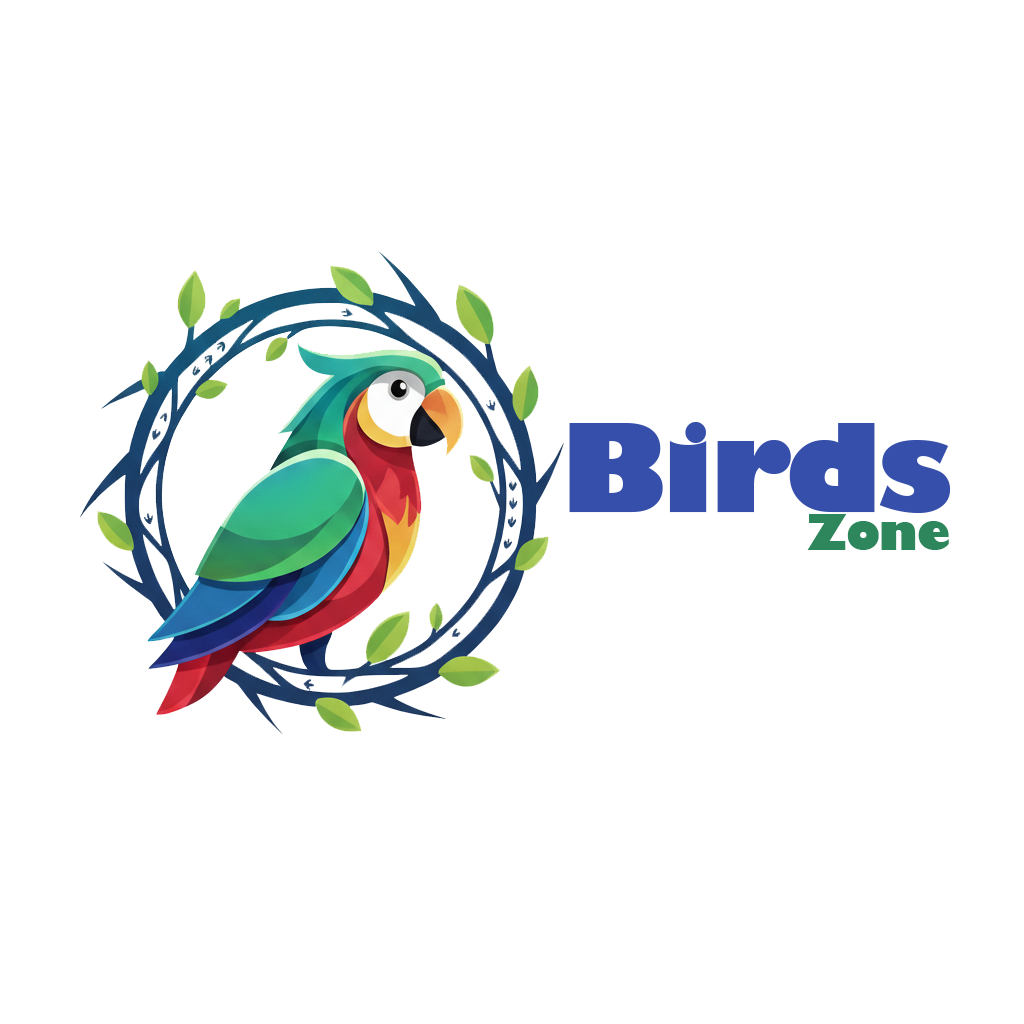
<style>
.page{position:relative;width:1024px;height:1024px;background:#ffffff}
.page>*{position:absolute;margin:0}
.t1{font:120px "GillSans-UltraBold";letter-spacing:-0.02em;color:#364fab}
.t2{font:48px "GillSans-UltraBold";letter-spacing:-0.02em;color:#2e865c}
</style>
<div class="page">
<p class="t1" style="left:569px;top:422px;width:382px;height:91px">Birds</p>
<p class="t2" style="left:807px;top:514px;width:142px;height:36px">Zone</p>
</div>
